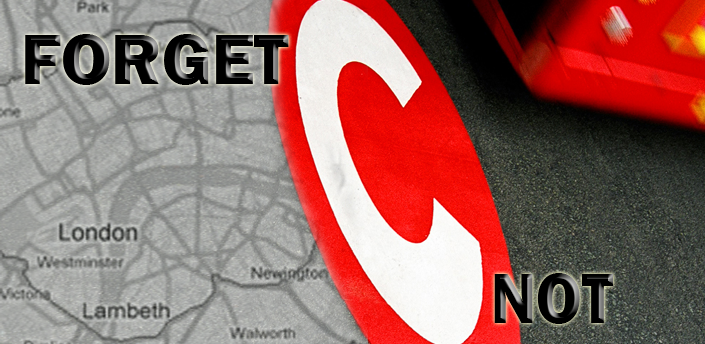
<style>
.page{position:relative;width:705px;height:344px}
.page>*{position:absolute;margin:0}
.t1{font:74.4px "FranklinGothic-Heavy";color:#000000}
.t2{font:74.4px "FranklinGothic-Heavy";color:#000000;scale:0.89 1}
</style>
<div class="page">
<p class="t1" style="left:25px;top:34px;width:264px;height:51px">FORGET</p>
<p class="t2" style="left:494px;top:273px;width:119px;height:51px">NOT</p>
</div>
